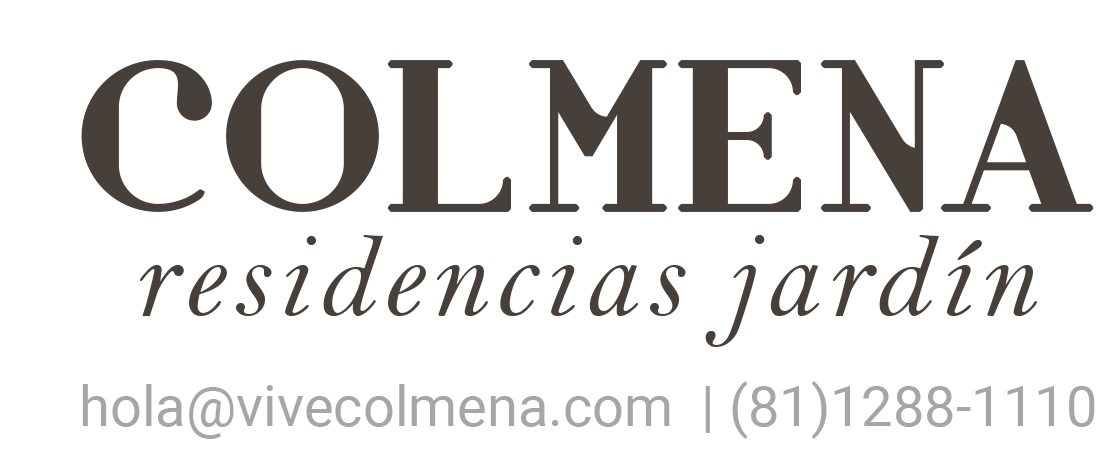
<style>
.page{position:relative;width:1100px;height:470px;background:#ffffff}
.page>*{position:absolute;margin:0}
.t1{font:120px "BellMTItalic";letter-spacing:0.06em;color:#47403a}
.t2{font:56px "Roboto-Regular";color:#a6a6a6}
</style>
<div class="page">
<p class="t1" style="left:139px;top:235px;width:898px;height:112px">residencias jardín</p>
<p class="t2" style="left:82px;top:381px;width:1013px;height:58px">hola@vivecolmena.com  | (81)1288-1110</p>
</div>
